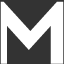
<style>
.page{position:relative;width:64px;height:64px;background:#333333}
.page>*{position:absolute;margin:0}
.t1{font:82.5px "Silom";color:#ffffff;scale:0.91 1}
</style>
<div class="page">
<p class="t1" style="left:0px;top:1px;width:64px;height:63px">M</p>
</div>
